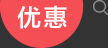
<style>
.page{position:relative;width:108px;height:48px;background:#f54e54}
.page>*{position:absolute;margin:0}
.t1{font:24px "FZLTZHK--GBK1-0";letter-spacing:0.1em;color:#feffff;text-transform:uppercase}
</style>
<div class="page">
<p class="t1" style="left:17px;top:5px;width:50px;height:24px">优惠</p>
</div>
